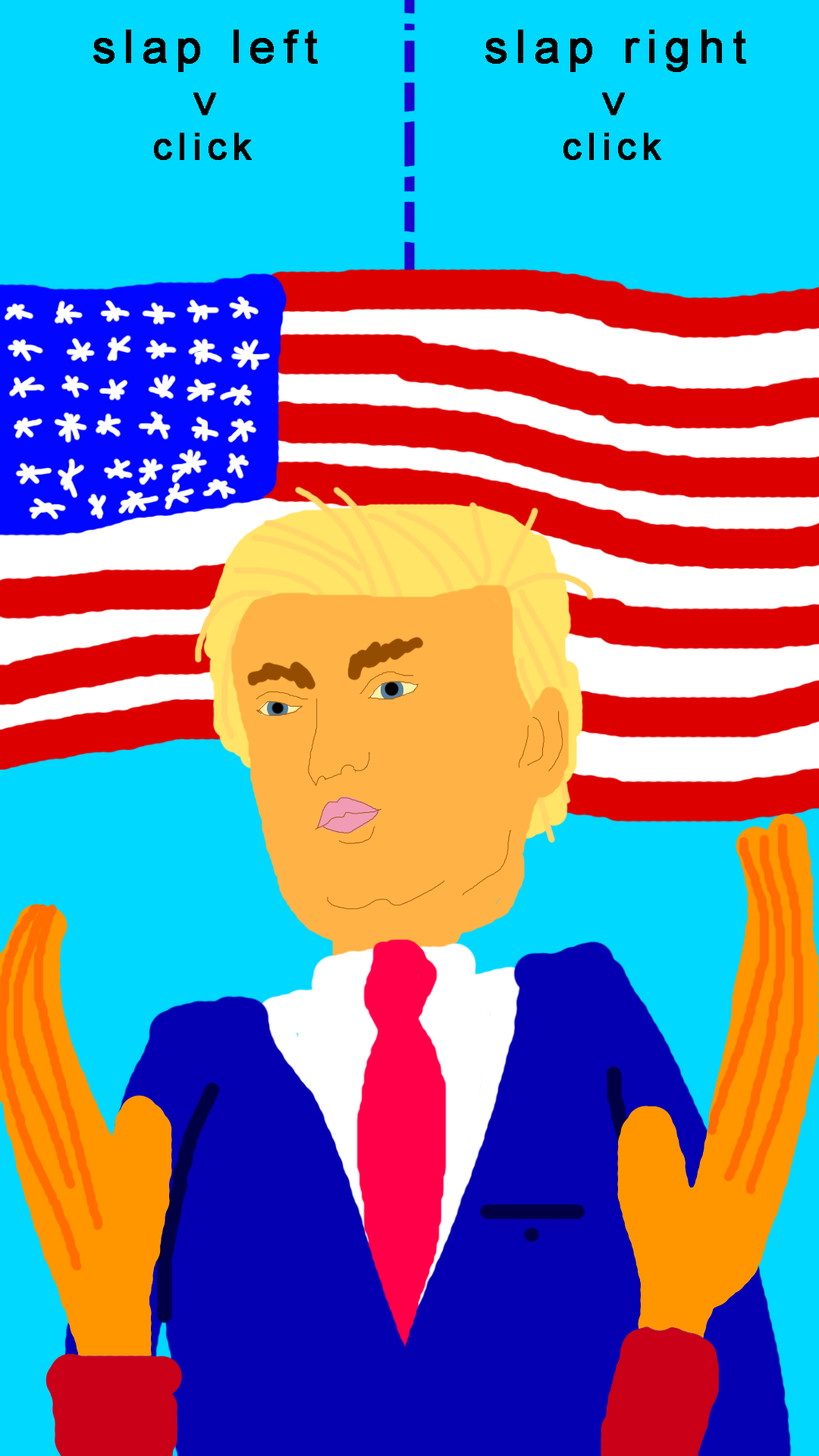
<style>
.page{position:relative;width:819px;height:1456px;background:#00d8ff}
.page>*{position:absolute;margin:0}
.t1{font:45.5px "ArialMT";letter-spacing:0.16em;color:#000000;font-weight:bold}
.t2{font:36.4px "ArialMT";letter-spacing:0.16em;color:#000000;font-weight:bold}
</style>
<div class="page">
<p class="t1" style="left:93px;top:30px;width:225px;height:42px">slap left</p>
<p class="t1" style="left:485px;top:30px;width:261px;height:42px">slap right</p>
<p class="t1" style="left:193px;top:93px;width:23px;height:22px;rotate:-90deg">&lt;</p>
<p class="t1" style="left:602px;top:93px;width:23px;height:22px;rotate:-90deg">&lt;</p>
<p class="t2" style="left:154px;top:133px;width:98px;height:27px">click</p>
<p class="t2" style="left:563px;top:133px;width:98px;height:27px">click</p>
</div>
